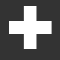
<style>
.page{position:relative;width:60px;height:60px;background:#333333}
.page>*{position:absolute;margin:0}
.t1{font:80px "Arial-Black";color:#ffffff}
</style>
<div class="page">
<p class="t1" style="left:9px;top:6px;width:43px;height:43px">+</p>
</div>
